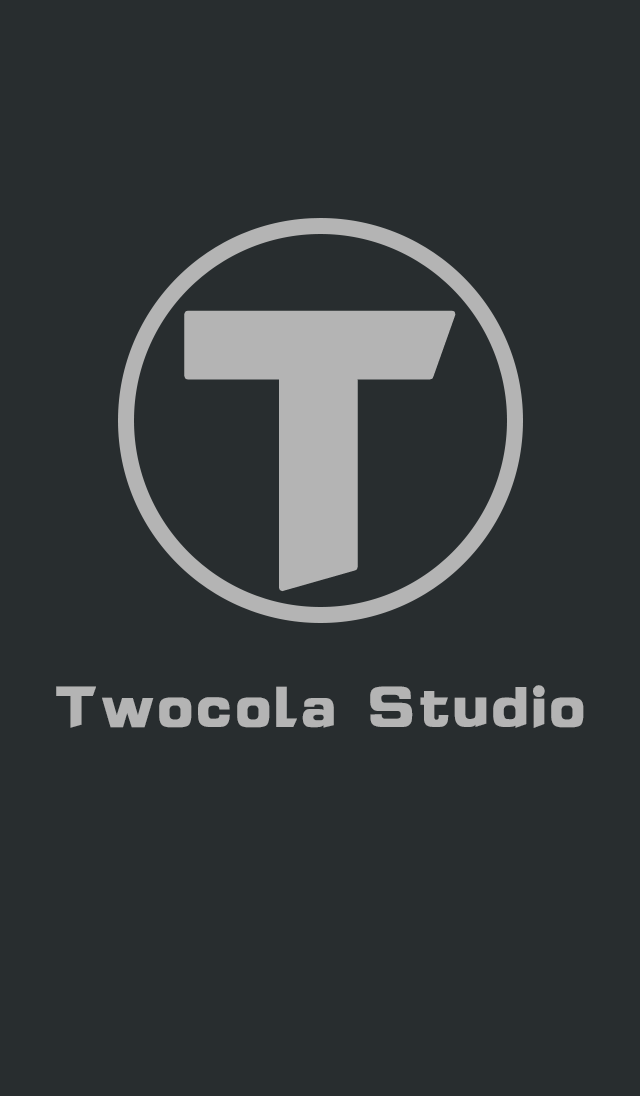
<style>
.page{position:relative;width:640px;height:1096px;background:#282d2f}
.page>*{position:absolute;margin:0}
.t1{font:60px "JLinXin";color:#b4b4b4}
</style>
<div class="page">
<p class="t1" style="left:56px;top:685px;width:528px;height:43px">Twocola Studio</p>
</div>
